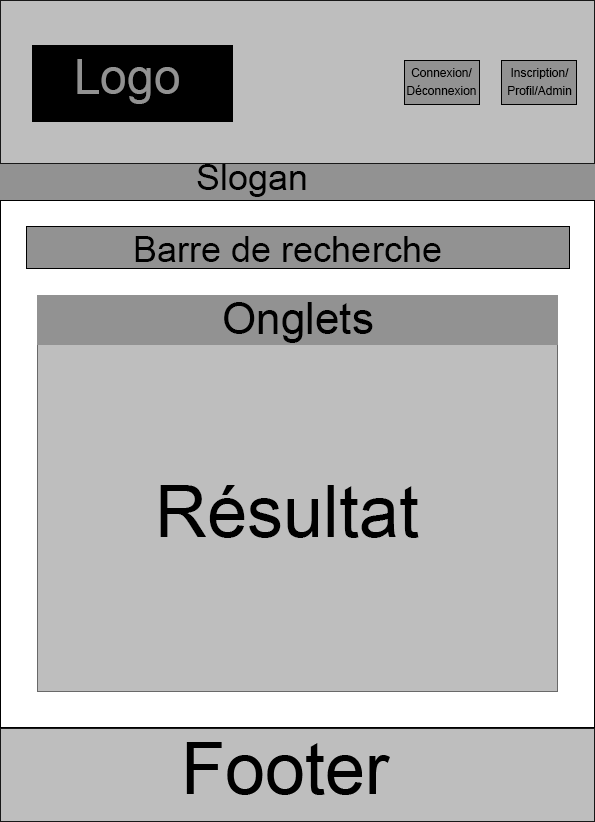
<style>
.page{position:relative;width:595px;height:822px;background:#bebebe}
.page>*{position:absolute;margin:0}
.t1{font:48px "ArialMT";color:#929292}
.t2{font:12px/18px "ArialMT";color:#000000}
.t3{font:36px "ArialMT";color:#000000}
.t4{font:44px "ArialMT";color:#000000}
.t5{font:72px "ArialMT";color:#000000}
</style>
<div class="page">
<p class="t1" style="left:77px;top:59px;width:102px;height:45px">Logo</p>
<p class="t2" style="left:407px;top:68px;width:69px;height:27px;text-align:center">Connexion/<br>Déconnexion</p>
<p class="t2" style="left:508px;top:68px;width:64px;height:27px;text-align:center">Inscription/<br>Profil/Admin</p>
<p class="t3" style="left:197px;top:164px;width:109px;height:33px">Slogan</p>
<p class="t3" style="left:135px;top:236px;width:306px;height:26px">Barre de recherche</p>
<p class="t4" style="left:224px;top:302px;width:149px;height:41px">Onglets</p>
<p class="t5" style="left:160px;top:485px;width:259px;height:53px">Résultat</p>
</div>
